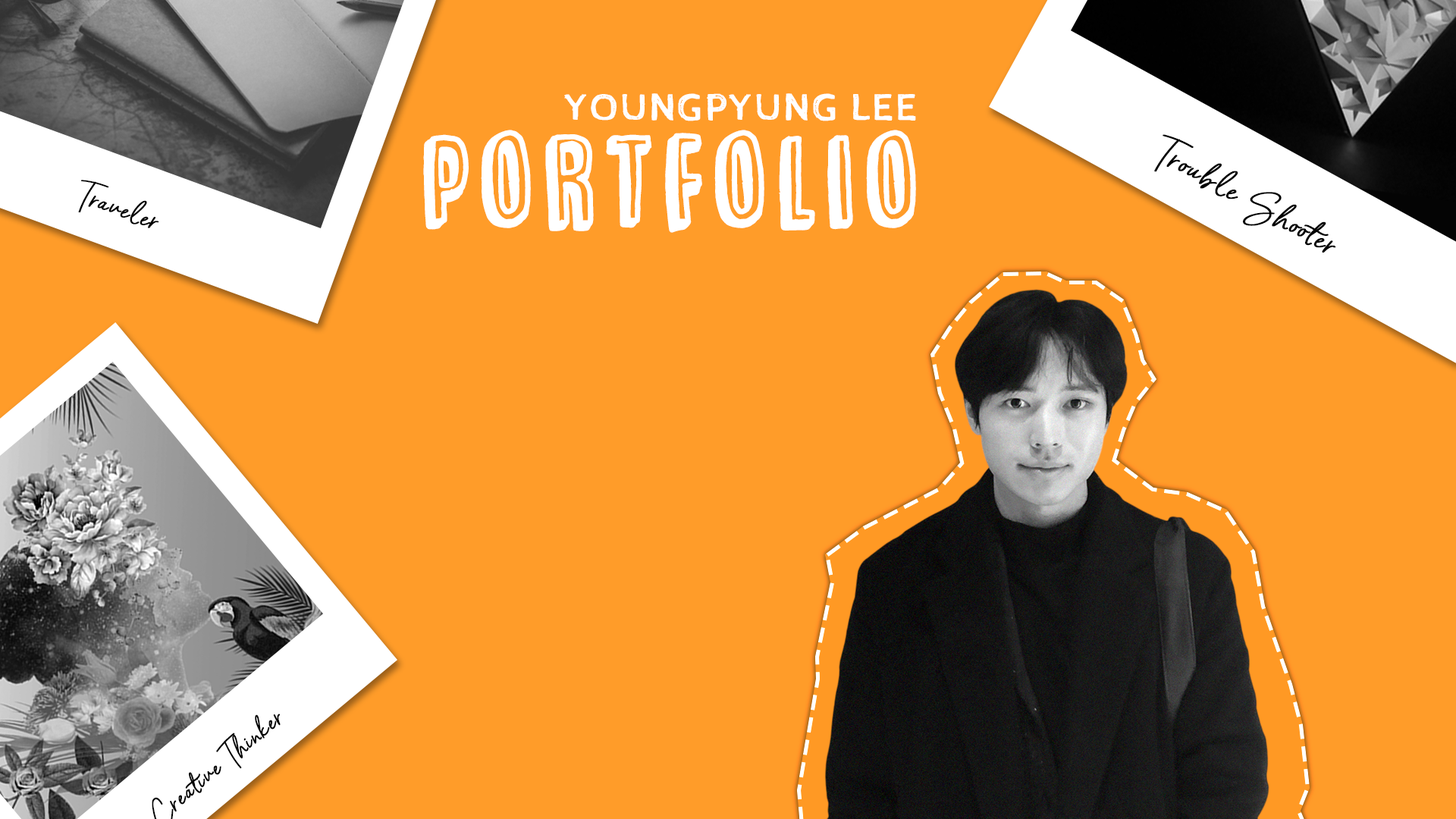
<style>
.page{position:relative;width:1456px;height:819px;background:#ff9c29}
.page>*{position:absolute;margin:0}
.t1{font:37.9px "CabinSketch-Regular";letter-spacing:0.062em;color:#ffffff;font-weight:bold}
.t2{font:144.1px "TradizionalDEMO-Regular";letter-spacing:0.062em;color:#ffffff;font-weight:bold}
.t3{font:29px "BarcelonyRegular";letter-spacing:0.062em;color:#010101;font-weight:bold}
.t4{font:24.8px "BarcelonyRegular";letter-spacing:0.062em;color:#010101;font-weight:bold}
</style>
<div class="page">
<p class="t1" style="left:564px;top:93px;width:352px;height:28px">YOUNGPYUNG LEE</p>
<p class="t2" style="left:423px;top:130px;width:493px;height:103px">Portfolio</p>
<p class="t3" style="left:1154px;top:134px;width:182px;height:119px;rotate:29deg">Trouble Shooter</p>
<p class="t4" style="left:78px;top:180px;width:81px;height:48px;rotate:20deg">Traveler</p>
</div>
